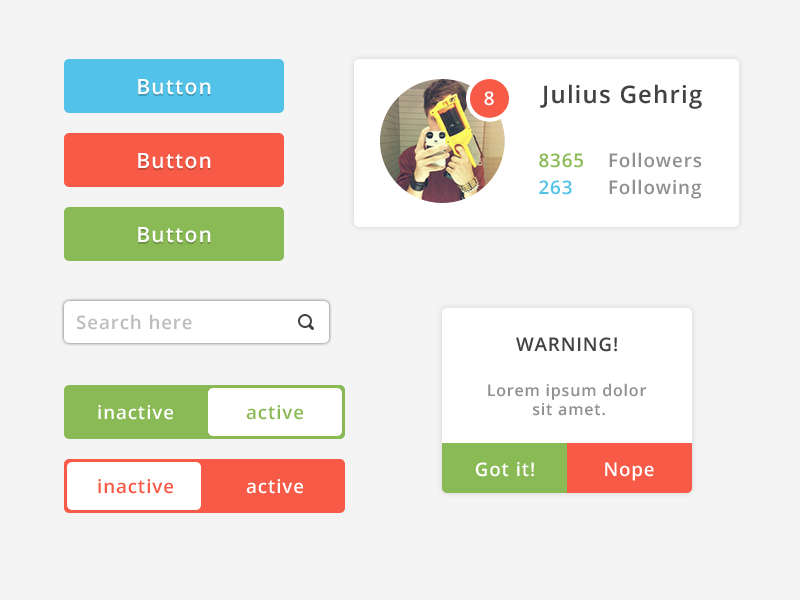
<style>
.page{position:relative;width:800px;height:600px;background:#f4f4f5}
.page>*{position:absolute;margin:0}
.t1{font:20.9px "OpenSans-Semibold";letter-spacing:0.05em;color:#ffffff}
.t2{font:24px "OpenSans-Semibold";letter-spacing:0.05em;color:#424242}
.t3{font:18.7px "OpenSans-Semibold";letter-spacing:0.05em;color:#ffffff}
.t4{font:18.7px "OpenSans-Semibold";letter-spacing:0.05em;color:#909090}
.t5{font:18.7px "OpenSans-Semibold";letter-spacing:0.05em;color:#8aba56}
.t6{font:18.7px "OpenSans-Semibold";letter-spacing:0.05em;color:#53c2e8}
.t7{font:18.7px "OpenSans-Semibold";letter-spacing:0.05em;color:#bdbdbd}
.t8{font:18.7px "OpenSans-Semibold";letter-spacing:0.05em;color:#424242}
.t9{font:16px "OpenSans-Semibold";letter-spacing:0.05em;color:#909090}
.t10{font:18.7px "OpenSans-Semibold";letter-spacing:0.05em;color:#f75b47}
</style>
<div class="page">
<p class="t1" style="left:138px;top:79px;width:73px;height:16px">Button</p>
<p class="t2" style="left:540px;top:84px;width:162px;height:25px">Julius Gehrig</p>
<p class="t3" style="left:484px;top:91px;width:10px;height:15px">8</p>
<p class="t1" style="left:138px;top:153px;width:73px;height:16px">Button</p>
<p class="t4" style="left:539px;top:152px;width:163px;height:16px"><span class="t5">8365    </span>Followers</p>
<p class="t4" style="left:539px;top:179px;width:163px;height:20px"><span class="t6">263      </span>Following</p>
<p class="t1" style="left:138px;top:227px;width:73px;height:16px">Button</p>
<p class="t7" style="left:77px;top:314px;width:115px;height:16px">Search here</p>
<p class="t8" style="left:516px;top:337px;width:101px;height:15px">WARNING!</p>
<p class="t9" style="left:488px;top:383px;width:159px;height:33px;text-align:center">Lorem ipsum dolor <br>sit amet.</p>
<p class="t3" style="left:98px;top:405px;width:75px;height:15px">inactive</p>
<p class="t5" style="left:246px;top:405px;width:57px;height:15px">active</p>
<p class="t3" style="left:475px;top:462px;width:59px;height:15px">Got it!</p>
<p class="t3" style="left:605px;top:462px;width:49px;height:19px">Nope</p>
<p class="t10" style="left:98px;top:479px;width:75px;height:15px">inactive</p>
<p class="t3" style="left:246px;top:479px;width:57px;height:15px">active</p>
</div>
